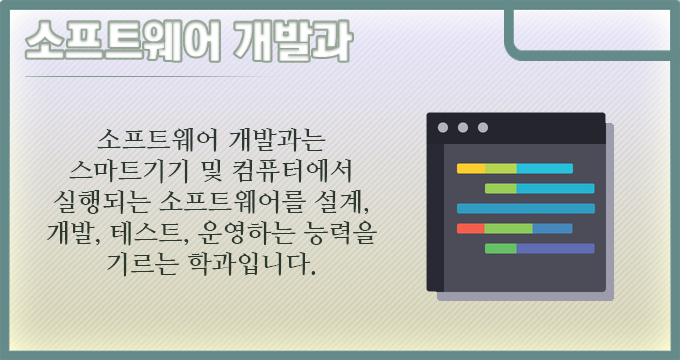
<style>
.page{position:relative;width:680px;height:360px}
.page>*{position:absolute;margin:0}
.t1{font:44px "KoreanTITGD5-R";letter-spacing:-0.01em;color:#ffffff}
.t2{font:26px "NanumMyeongjoBold";letter-spacing:-0.01em;color:#2a382e}
</style>
<div class="page">
<p class="t1" style="left:26px;top:21px;width:326px;height:40px">소프트웨어 개발과</p>
<p class="t2" style="left:47px;top:128px;width:330px;height:149px;text-align:center">소프트웨어 개발과는 스마트기기 및 컴퓨터에서 실행되는 소프트웨어를 설계, 개발, 테스트, 운영하는 능력을 기르는 학과입니다.</p>
</div>
